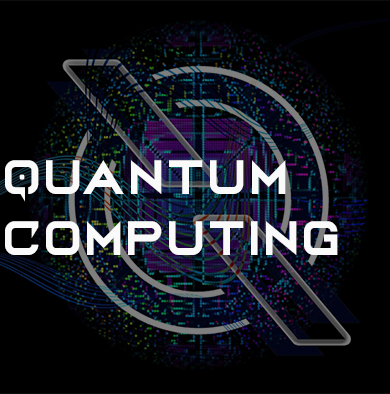
<style>
.page{position:relative;width:390px;height:394px;background:#000000}
.page>*{position:absolute;margin:0}
.t1{font:50.7px "BordDemo";color:#fafafa;scale:0.97 1}
</style>
<div class="page">
<p class="t1" style="left:5px;top:160px;width:333px;height:95px">Quantum<br>Computing</p>
</div>
